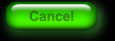
<style>
.page{position:relative;width:115px;height:41px}
.page>*{position:absolute;margin:0}
.t1{font:14px "Arial-BoldMT";letter-spacing:-0.01em;color:#378f14}
</style>
<div class="page">
<p class="t1" style="left:29px;top:10px;width:45px;height:12px">Cancel</p>
</div>
